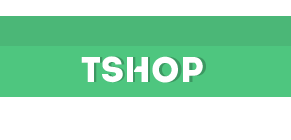
<style>
.page{position:relative;width:291px;height:140px;background:#ffffff}
.page>*{position:absolute;margin:0}
.t1{font:35.5px "Intro";color:#ffffff}
.t2{font:35.5px "Intro"}
</style>
<div class="page">
<p class="t1" style="left:81px;top:56px;width:122px;height:27px">TSHOP</p>
<p class="t2" style="left:83px;top:56px;width:123px;height:27px">TSHOP</p>
</div>
